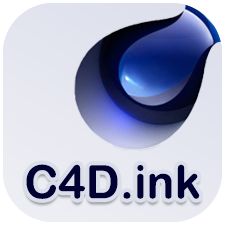
<style>
.page{position:relative;width:225px;height:225px}
.page>*{position:absolute;margin:0}
.t1{font:46px "ArialRoundedMTBold";color:#000033}
</style>
<div class="page">
<p class="t1" style="left:26px;top:164px;width:174px;height:35px">C4D.ink</p>
</div>
